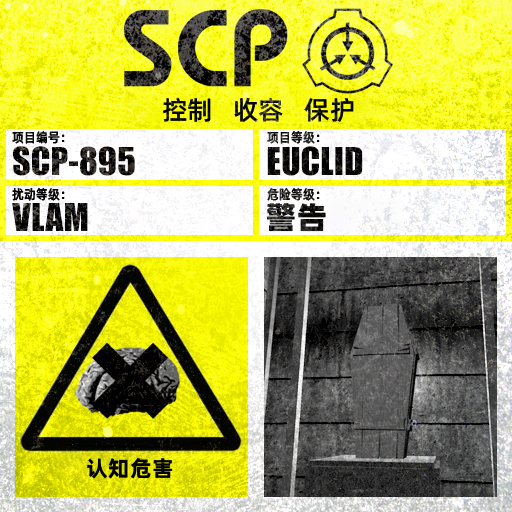
<style>
.page{position:relative;width:512px;height:512px}
.page>*{position:absolute;margin:0}
.t1{font:26px "AlibabaPuHuiTiM";color:#000000}
.t2{font:13.3px "AlibabaPuHuiTiM";letter-spacing:0.02em;color:#000000;scale:0.9 1}
.t3{font:13.3px "AlibabaPuHuiTiM";letter-spacing:0.02em;scale:0.9 1}
.t4{font:30.3px "AlibabaPuHuiTiH";letter-spacing:0.02em}
.t5{font:22px "AlibabaPuHuiTiB";letter-spacing:0.02em;color:#000000}
</style>
<div class="page">
<p class="t1" style="left:163px;top:97px;width:191px;height:26px">控制   收容   保护</p>
<p class="t2" style="left:12px;top:131px;width:53px;height:13px">项目编号：</p>
<p class="t3" style="left:267px;top:131px;width:53px;height:13px">项目等级：</p>
<p class="t2" style="left:12px;top:188px;width:53px;height:13px">扰动等级：</p>
<p class="t3" style="left:267px;top:188px;width:53px;height:13px">危险等级：</p>
<p class="t4" style="left:267px;top:203px;width:59px;height:29px">警告</p>
<p class="t5" style="left:87px;top:458px;width:86px;height:21px">认知危害</p>
</div>
